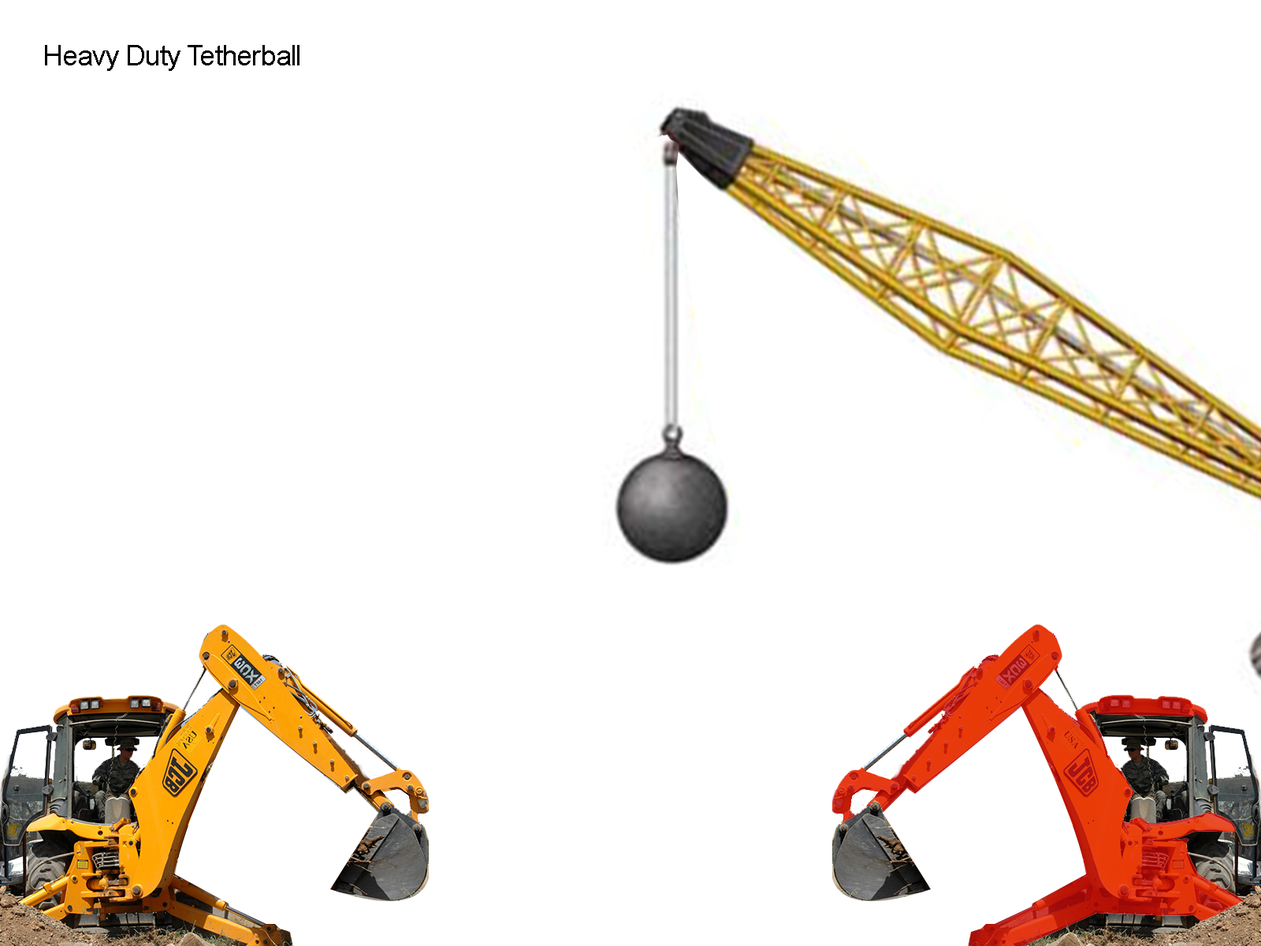
<style>
.page{position:relative;width:1261px;height:946px;background:#ffffff}
.page>*{position:absolute;margin:0}
.t1{font:28.4px "ArialMT";letter-spacing:-0.02em;color:#000000}
</style>
<div class="page">
<p class="t1" style="left:45px;top:45px;width:254px;height:26px">Heavy Duty Tetherball</p>
</div>
